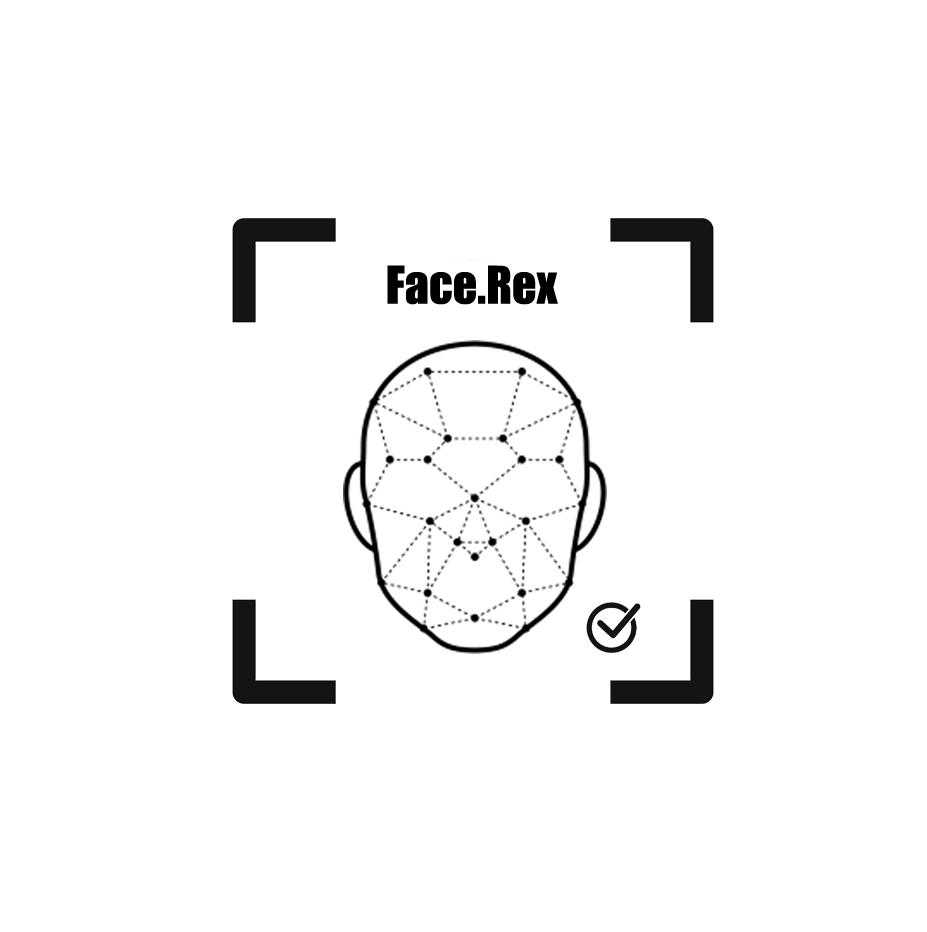
<style>
.page{position:relative;width:927px;height:932px;background:#ffffff}
.page>*{position:absolute;margin:0}
.t1{font:48px "Impact";color:#000000}
</style>
<div class="page">
<p class="t1" style="left:387px;top:265px;width:171px;height:40px">Face.Rex</p>
</div>
